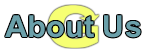
<style>
.page{position:relative;width:150px;height:54px;background:#ffffff}
.page>*{position:absolute;margin:0}
.t1{font:30.5px "ArialNarrowSpecialG1-Bold";color:#6ba0aa;scale:1.23 1}
</style>
<div class="page">
<p class="t1" style="left:5px;top:15px;width:136px;height:23px">About Us</p>
</div>
